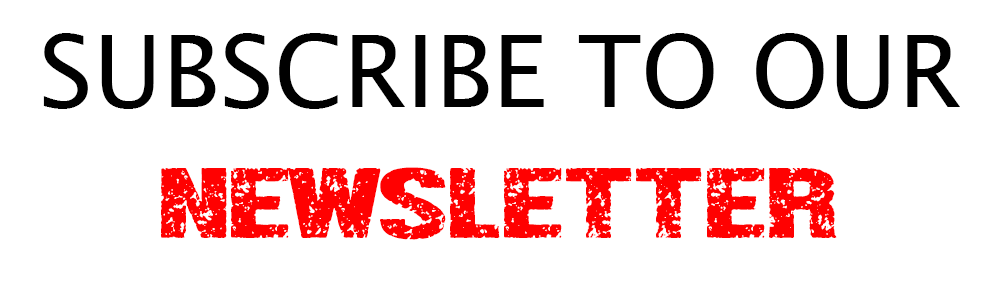
<style>
.page{position:relative;width:1000px;height:300px;background:#ffffff}
.page>*{position:absolute;margin:0}
.t1{font:100px "LucidaSansUnicode";color:#000000;text-transform:uppercase}
.t2{font:100px "FakeNews";color:#ff0101;text-transform:uppercase}
</style>
<div class="page">
<p class="t1" style="left:43px;top:33px;width:917px;height:76px">Subscribe To Our</p>
<p class="t2" style="left:161px;top:167px;width:676px;height:73px">Newsletter</p>
</div>
